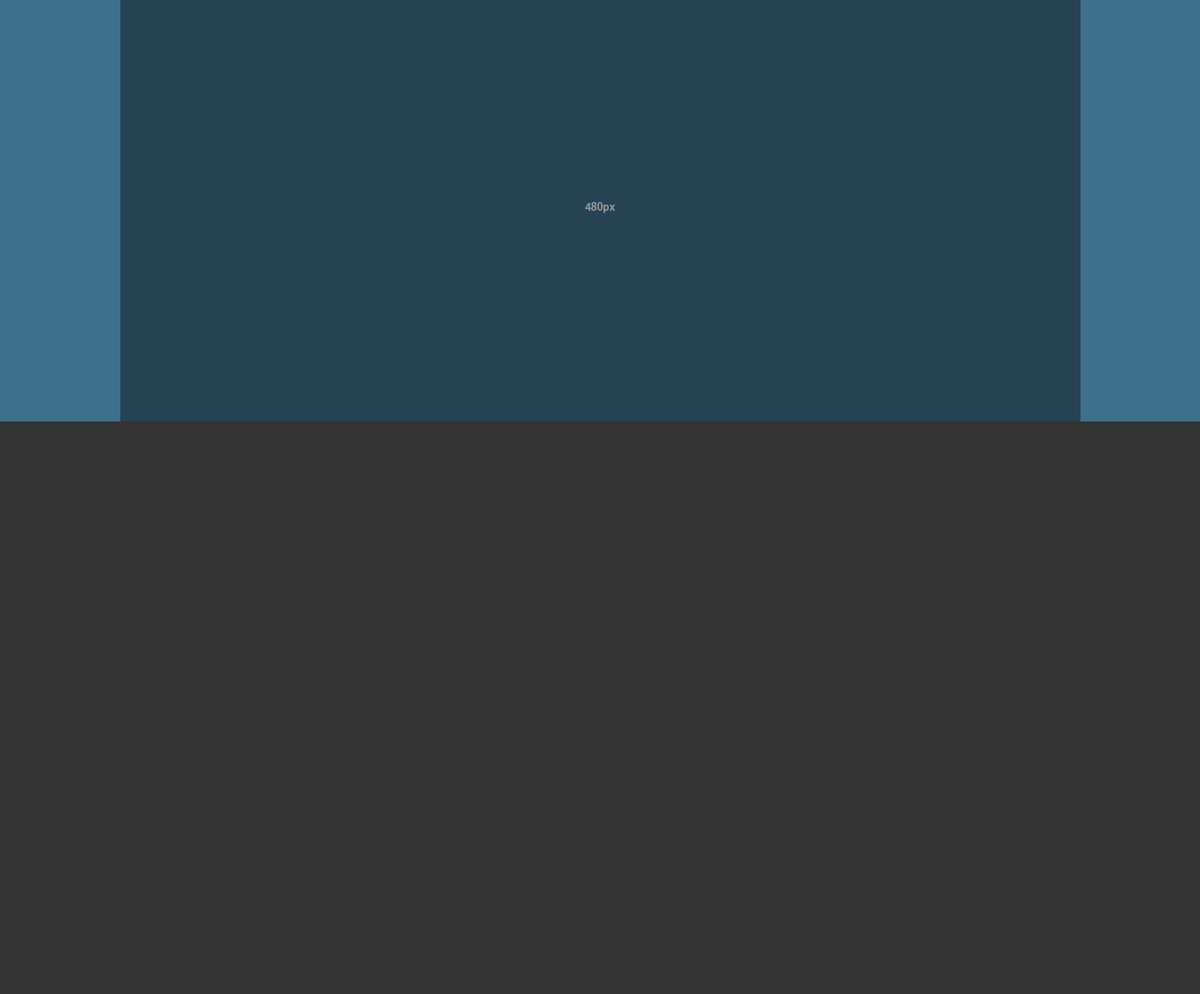
<style>
.page{position:relative;width:1200px;height:994px;background:#333333}
.page>*{position:absolute;margin:0}
.t1{font:10.5px "AdobeHeitiStd-Regular";color:#999898}
</style>
<div class="page">
<p class="t1" style="left:585px;top:202px;width:30px;height:11px">480px</p>
</div>
